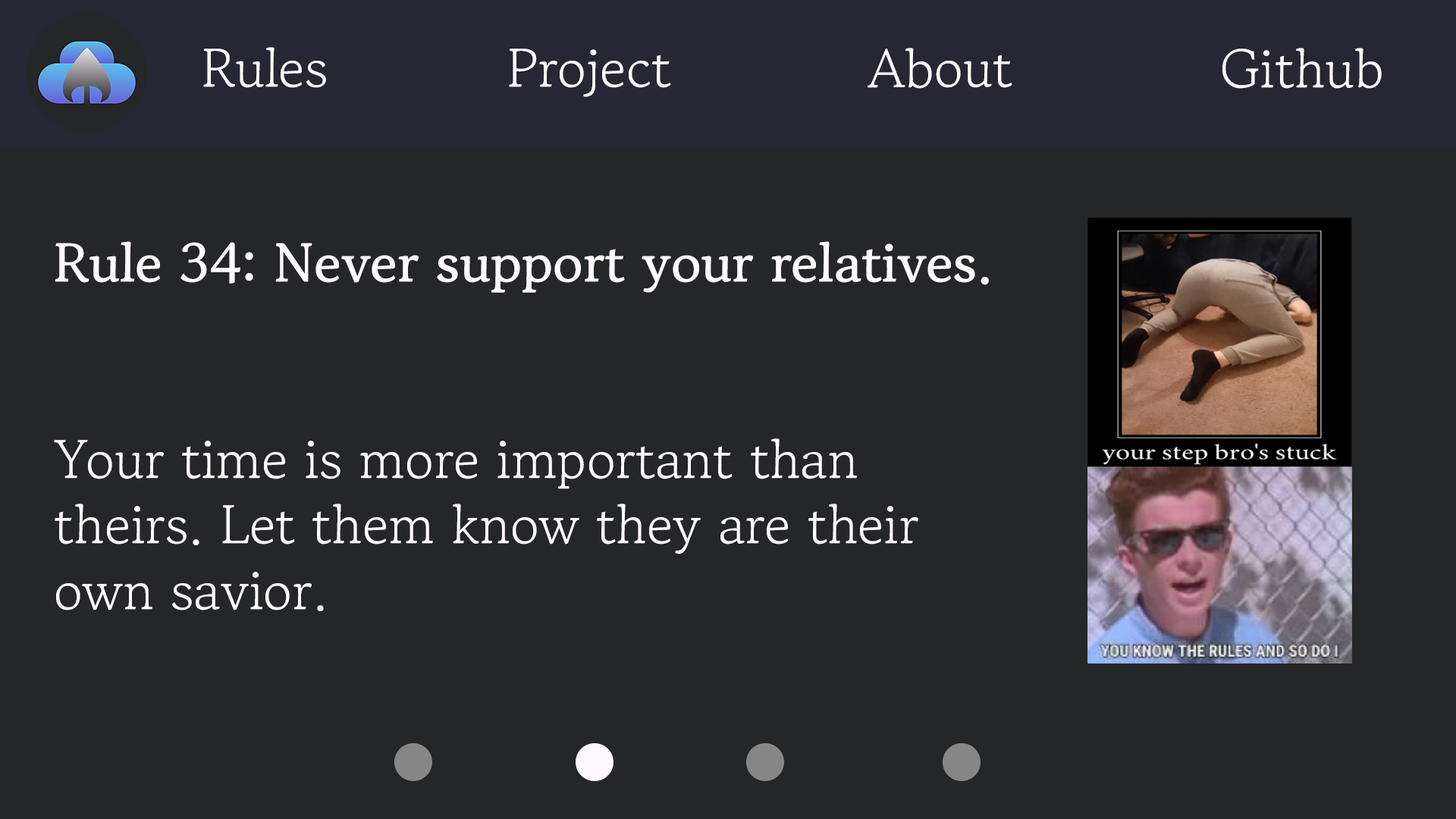
<style>
.page{position:relative;width:1456px;height:819px;background:#252627}
.page>*{position:absolute;margin:0}
.t1{font:54.6px "GowunBatang-Regular";color:#fffaff}
.t2{font:54.6px "GowunBatang-Bold";color:#fffaff}
</style>
<div class="page">
<p class="t1" style="left:203px;top:47px;width:123px;height:41px">Rules</p>
<p class="t1" style="left:509px;top:49px;width:162px;height:48px">Project</p>
<p class="t1" style="left:868px;top:48px;width:144px;height:41px">About</p>
<p class="t1" style="left:1222px;top:48px;width:160px;height:41px">Github</p>
<p class="t1" style="left:54px;top:241px;width:935px;height:370px"><span class="t2">Rule 34: Never support your relatives.<br></span><br><br>Your time is more important than theirs. Let them know they are their own savior.</p>
</div>
